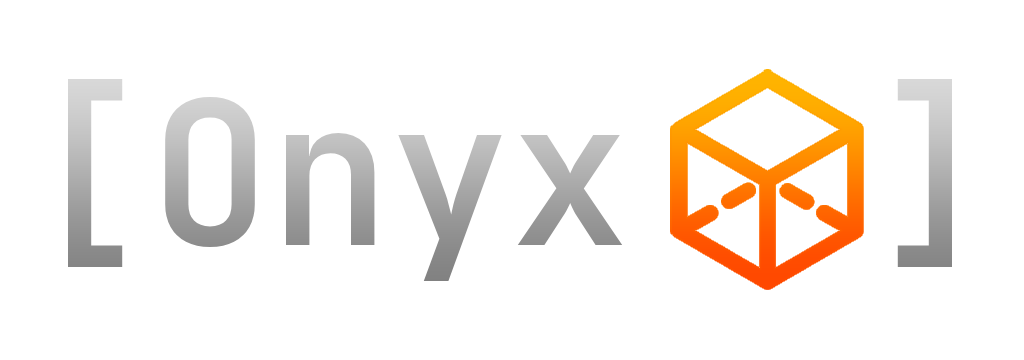
<style>
.page{position:relative;width:1024px;height:360px;background:#ffffff}
.page>*{position:absolute;margin:0}
.t1{font:200px "JetBrainsMono-SemiBold"}
</style>
<div class="page">
<p class="t1" style="left:68px;top:79px;width:884px;height:202px">[Onyx  ]</p>
</div>
